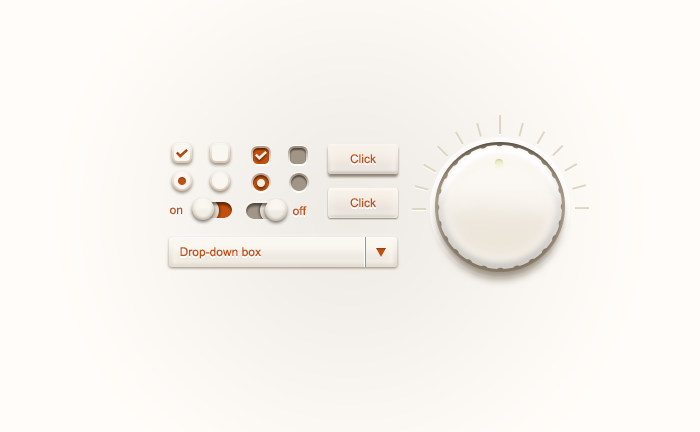
<style>
.page{position:relative;width:700px;height:432px;background:#fffcf9}
.page>*{position:absolute;margin:0}
.t1{font:12px "ArialMT";color:#c2500f}
</style>
<div class="page">
<p class="t1" style="left:350px;top:154px;width:26px;height:10px">Click</p>
<p class="t1" style="left:350px;top:198px;width:26px;height:10px">Click</p>
<p class="t1" style="left:170px;top:207px;width:13px;height:8px">on</p>
<p class="t1" style="left:293px;top:206px;width:14px;height:10px">off</p>
<p class="t1" style="left:180px;top:247px;width:81px;height:12px">Drop-down box</p>
</div>
